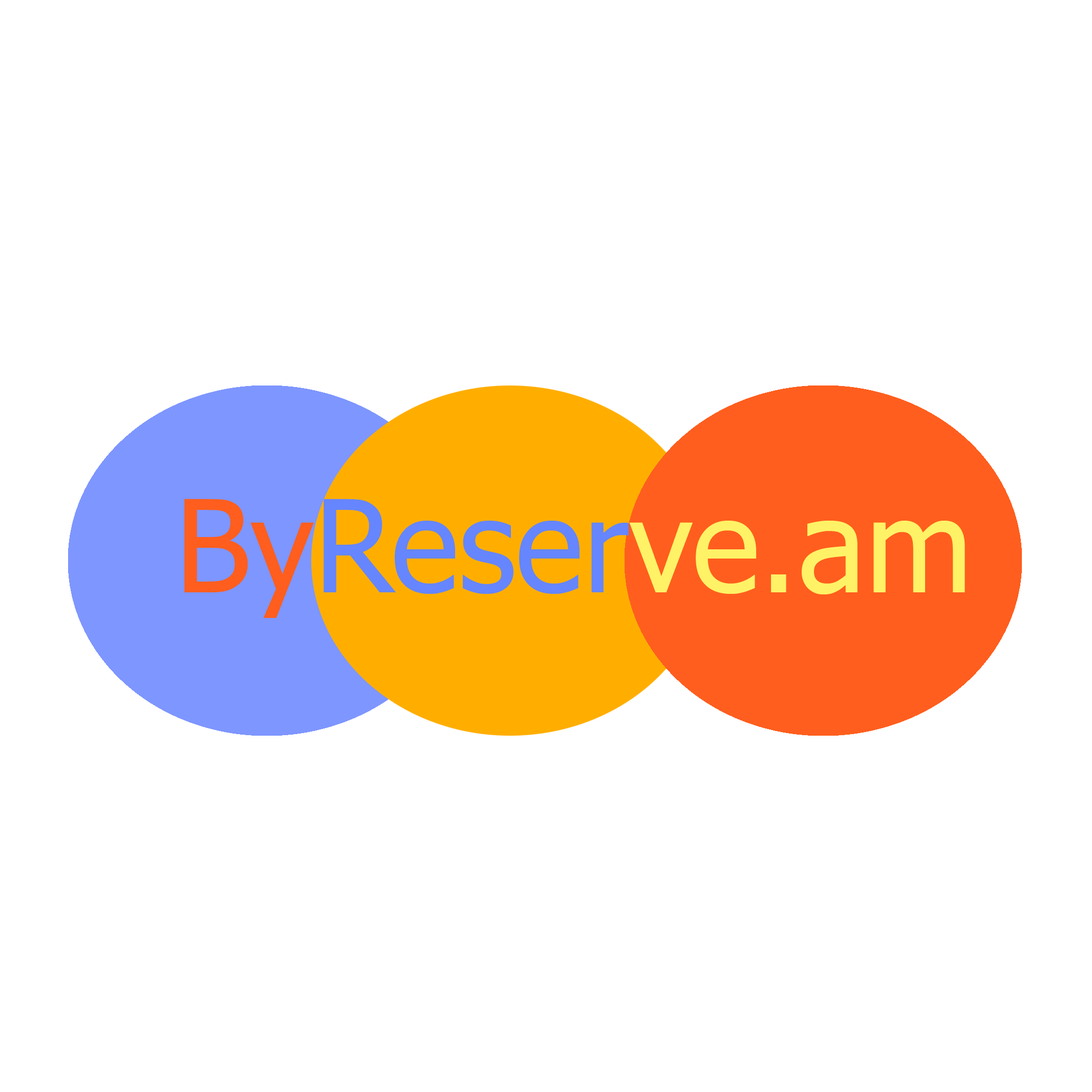
<style>
.page{position:relative;width:1092px;height:1092px;background:#ffffff}
.page>*{position:absolute;margin:0}
.t1{font:128px "Tahoma";color:#6686ff}
.t2{font:128px "Tahoma";color:#ff5e1e}
.t3{font:128px "Tahoma";color:#fff266}
</style>
<div class="page">
<p class="t1" style="left:184px;top:499px;width:781px;height:119px"><span class="t2">By</span>Reser<span class="t3">ve.am</span></p>
</div>
